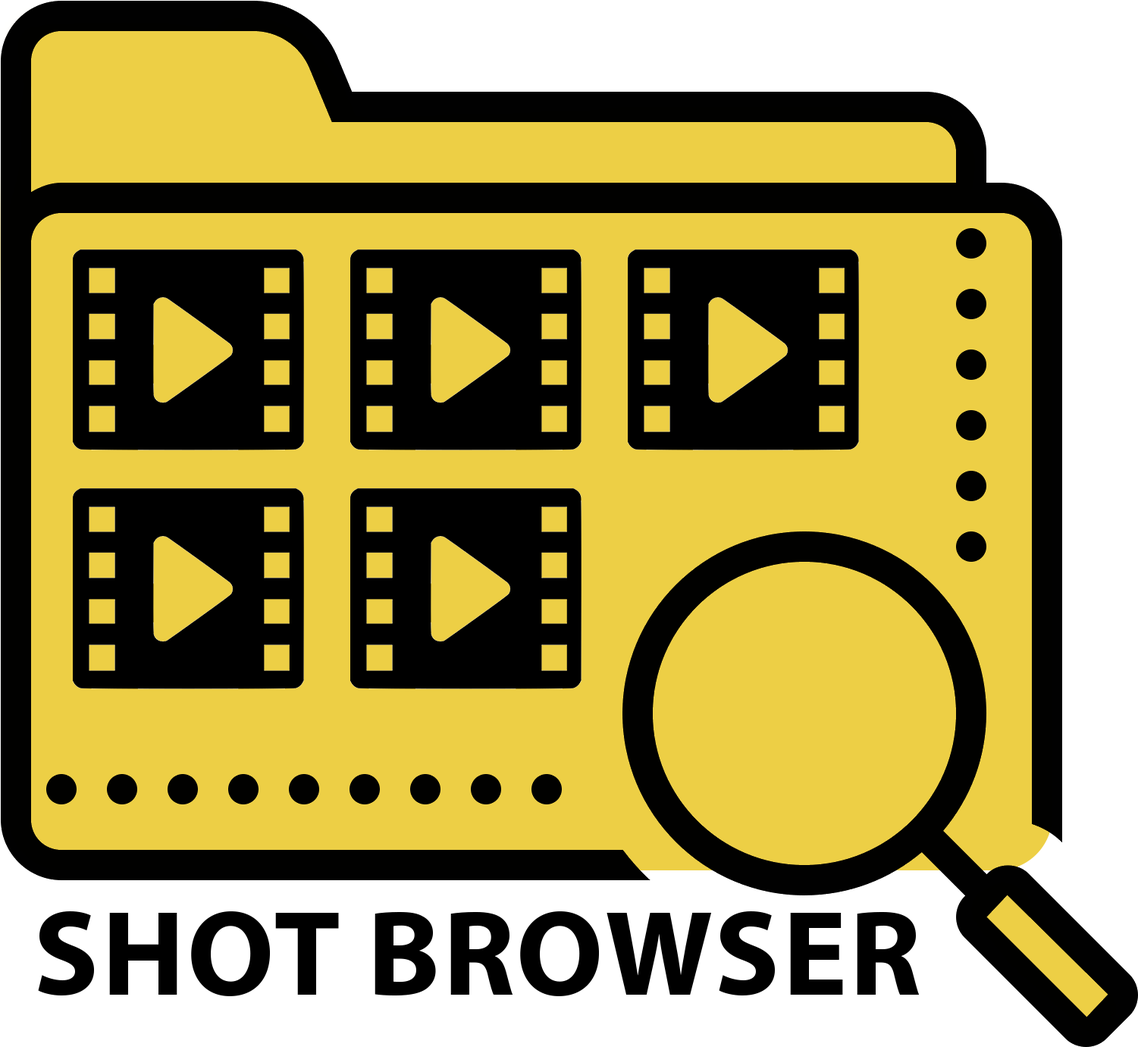
<style>
.page{position:relative;width:1138px;height:1047px;background:#edcf45}
.page>*{position:absolute;margin:0}
.t1{font:121.4px "MyriadPro-Bold";color:#000000;text-transform:uppercase}
</style>
<div class="page">
<p class="t1" style="left:38px;top:912px;width:882px;height:85px">SHOT BROWSER</p>
</div>
